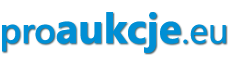
<style>
.page{position:relative;width:235px;height:81px;background:#ffffff}
.page>*{position:absolute;margin:0}
.t1{font:42px "SegoeUI-Bold";color:#008fd5}
.t2{font:36px "SegoeUI-SemiBold";color:#008fd5}
.t3{font:36px "SegoeUI";color:#008fd5}
</style>
<div class="page">
<p class="t1" style="left:2px;top:12px;width:224px;height:41px"><span class="t2">pro</span>aukcje<span class="t3">.eu</span></p>
</div>
